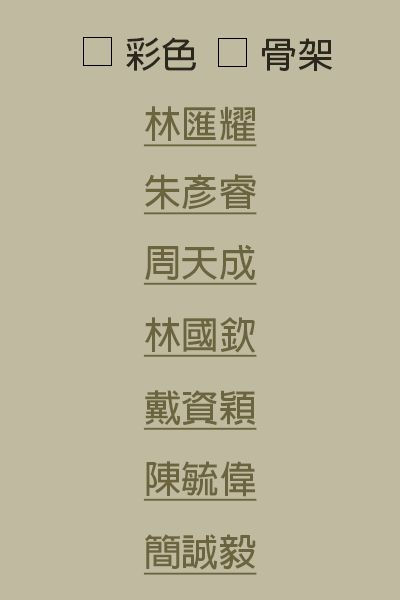
<style>
.page{position:relative;width:400px;height:600px;background:#c0bba0}
.page>*{position:absolute;margin:0}
.t1{font:8.6px "AdobeFanHeitiStd-Bold";color:#2a281d}
.t2{font:8.5px "AdobeFanHeitiStd-Bold";color:#2a281d;scale:1.04 1}
.t3{font:37.5px "AdobeFanHeitiStd-Bold";color:#6c643e;text-decoration:underline}
</style>
<div class="page">
<p class="t1" style="left:126px;top:37px;width:70px;height:34px">彩色</p>
<p class="t2" style="left:262px;top:38px;width:71px;height:33px">骨架</p>
<p class="t3" style="left:143px;top:106px;width:114px;height:41px">林匯耀</p>
<p class="t3" style="left:143px;top:174px;width:114px;height:41px">朱彥睿</p>
<p class="t3" style="left:143px;top:244px;width:114px;height:41px">周天成</p>
<p class="t3" style="left:143px;top:317px;width:114px;height:40px">林國欽</p>
<p class="t3" style="left:143px;top:390px;width:114px;height:40px">戴資穎</p>
<p class="t3" style="left:143px;top:461px;width:114px;height:40px">陳毓偉</p>
<p class="t3" style="left:143px;top:534px;width:114px;height:41px">簡誠毅</p>
</div>
